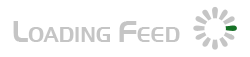
<style>
.page{position:relative;width:250px;height:57px;background:#ffffff}
.page>*{position:absolute;margin:0}
.t1{font:21px "Slicker";color:#c5c5c5}
.t2{font:30px "Slicker";color:#c5c5c5}
</style>
<div class="page">
<p class="t1" style="left:13px;top:21px;width:167px;height:21px"><span class="t2">L</span>OADING <span class="t2">F</span>EED</p>
</div>
